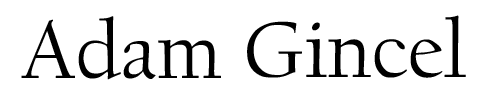
<style>
.page{position:relative;width:500px;height:103px;background:#ffffff}
.page>*{position:absolute;margin:0}
.t1{font:83.3px "CalifornianFB-Reg";color:#000000}
</style>
<div class="page">
<p class="t1" style="left:21px;top:16px;width:200px;height:64px">Adam</p>
<p class="t1" style="left:247px;top:15px;width:219px;height:63px">Gincel</p>
</div>
